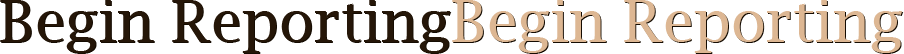
<style>
.page{position:relative;width:904px;height:54px;background:#ffffff}
.page>*{position:absolute;margin:0}
.t1{font:58.3px "LucidaBright";color:#251608}
.t2{font:58.3px "LucidaBright";color:#150c02}
.t3{font:58.3px "LucidaBright";color:#ddb793}
</style>
<div class="page">
<p class="t1" style="left:0px;top:0px;width:451px;height:53px">Begin Reporting</p>
<p class="t2" style="left:1px;top:1px;width:451px;height:53px">Begin Reporting</p>
<p class="t3" style="left:452px;top:0px;width:451px;height:53px">Begin Reporting</p>
<p class="t3" style="left:453px;top:1px;width:451px;height:53px">Begin Reporting</p>
</div>
